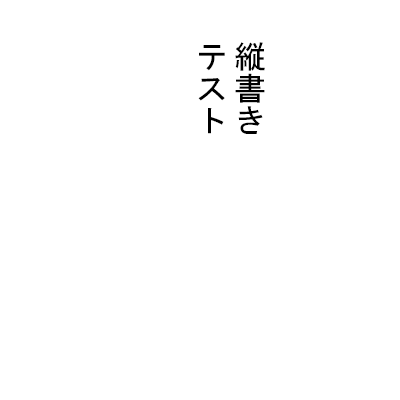
<style>
.page{position:relative;width:400px;height:400px;background:#ffffff}
.page>*{position:absolute;margin:0}
.t1{font:32px "MS-Gothic";color:#000000}
</style>
<div class="page">
<p class="t1" style="left:198px;top:42px;width:67px;height:92px">縦書き<br>テスト</p>
</div>
